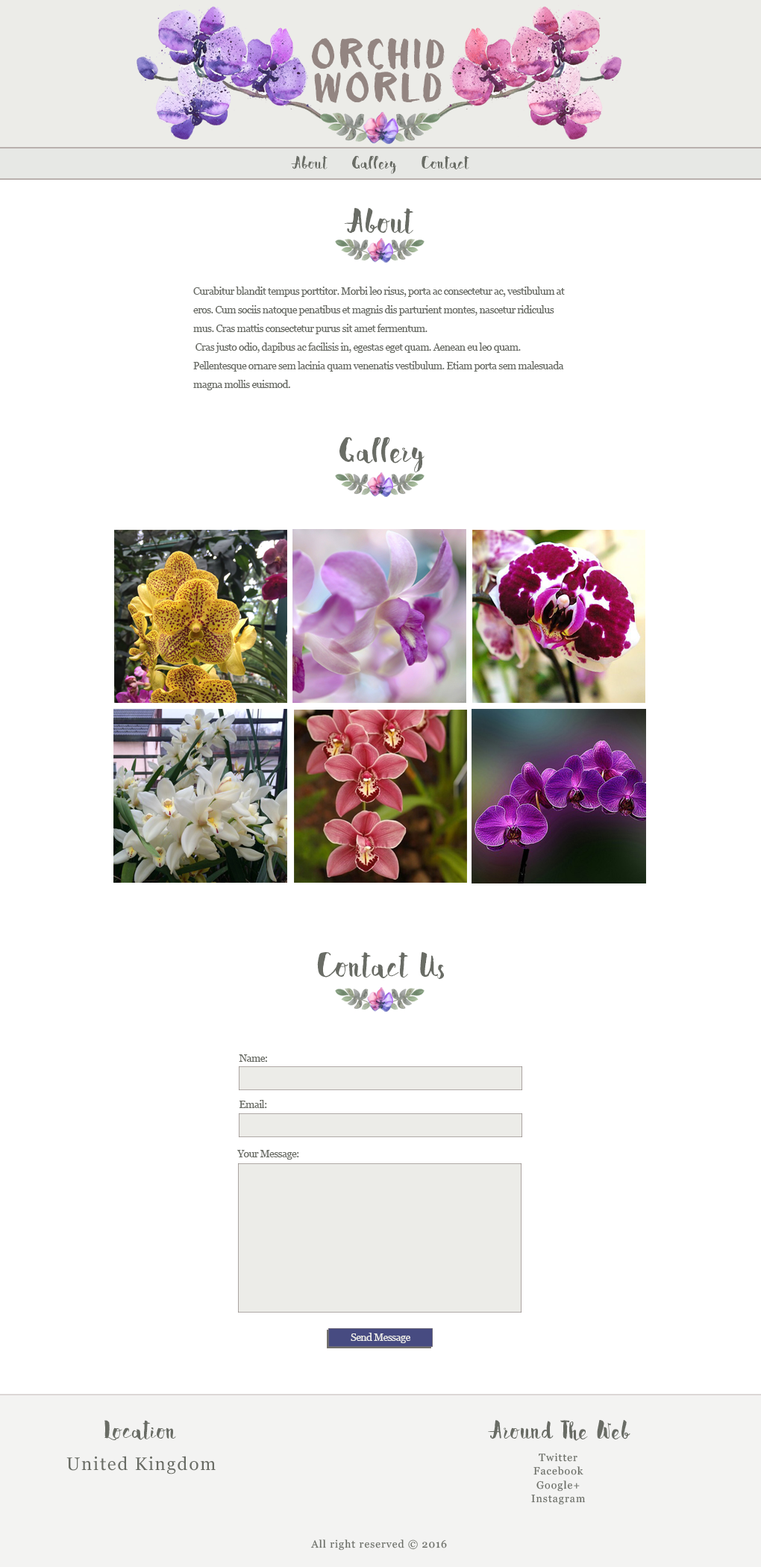
<style>
.page{position:relative;width:761px;height:1567px;background:#ffffff}
.page>*{position:absolute;margin:0}
.t1{font:40.9px/34.1px "Petal-Regular";letter-spacing:0.075em;color:#938581;text-transform:uppercase}
.t2{font:18.5px "Beverly-Regular";letter-spacing:0.075em;color:#696c65}
.t3{font:35.8px "Beverly-Regular";letter-spacing:0.075em;color:#696c65}
.t4{font:10.4px/18.7px "Georgia";letter-spacing:-0.045em;color:#696c65}
.t5{font:10.4px "Georgia";letter-spacing:-0.045em;color:#696c65}
.t6{font:10.4px "Georgia";letter-spacing:-0.045em;color:#ecece8}
.t7{font:26.9px "Beverly-Regular";letter-spacing:0.075em;color:#696c65}
.t8{font:18.2px "Georgia";letter-spacing:0.075em;color:#696c65}
.t9{font:10.4px/13.5px "Georgia";letter-spacing:0.075em;color:#696c65}
.t10{font:10.4px "Georgia";letter-spacing:0.075em;color:#696c65}
</style>
<div class="page">
<p class="t1" style="left:311px;top:38px;width:134px;height:65px;text-align:center">Orchid<br>World</p>
<p class="t2" style="left:291px;top:155px;width:178px;height:19px">About    Gallery    Contact</p>
<p class="t3" style="left:344px;top:207px;width:69px;height:27px">About</p>
<p class="t4" style="left:193px;top:287px;width:372px;height:103px">Curabitur blandit tempus porttitor. Morbi leo risus, porta ac consectetur ac, vestibulum at eros. Cum sociis natoque penatibus et magnis dis parturient montes, nascetur ridiculus mus. Cras mattis consectetur purus sit amet fermentum.<br> Cras justo odio, dapibus ac facilisis in, egestas eget quam. Aenean eu leo quam. <br>Pellentesque ornare sem lacinia quam venenatis vestibulum. Etiam porta sem malesuada magna mollis euismod.</p>
<p class="t3" style="left:339px;top:436px;width:86px;height:36px">Gallery</p>
<p class="t3" style="left:317px;top:951px;width:127px;height:28px">Contact Us</p>
<p class="t5" style="left:239px;top:1054px;width:28px;height:8px">Name:</p>
<p class="t5" style="left:240px;top:1100px;width:27px;height:8px">Email:</p>
<p class="t5" style="left:237px;top:1150px;width:62px;height:9px">Your Message:</p>
<p class="t6" style="left:351px;top:1333px;width:60px;height:10px">Send Message</p>
<p class="t7" style="left:104px;top:1420px;width:72px;height:20px">Location</p>
<p class="t7" style="left:488px;top:1420px;width:142px;height:21px">Around The Web</p>
<p class="t8" style="left:66px;top:1456px;width:150px;height:18px">United Kingdom</p>
<p class="t9" style="left:531px;top:1453px;width:55px;height:52px;text-align:center">Twitter<br>Facebook<br>Google+<br>Instagram</p>
<p class="t10" style="left:310px;top:1539px;width:137px;height:11px">All right reserved © 2016</p>
</div>
